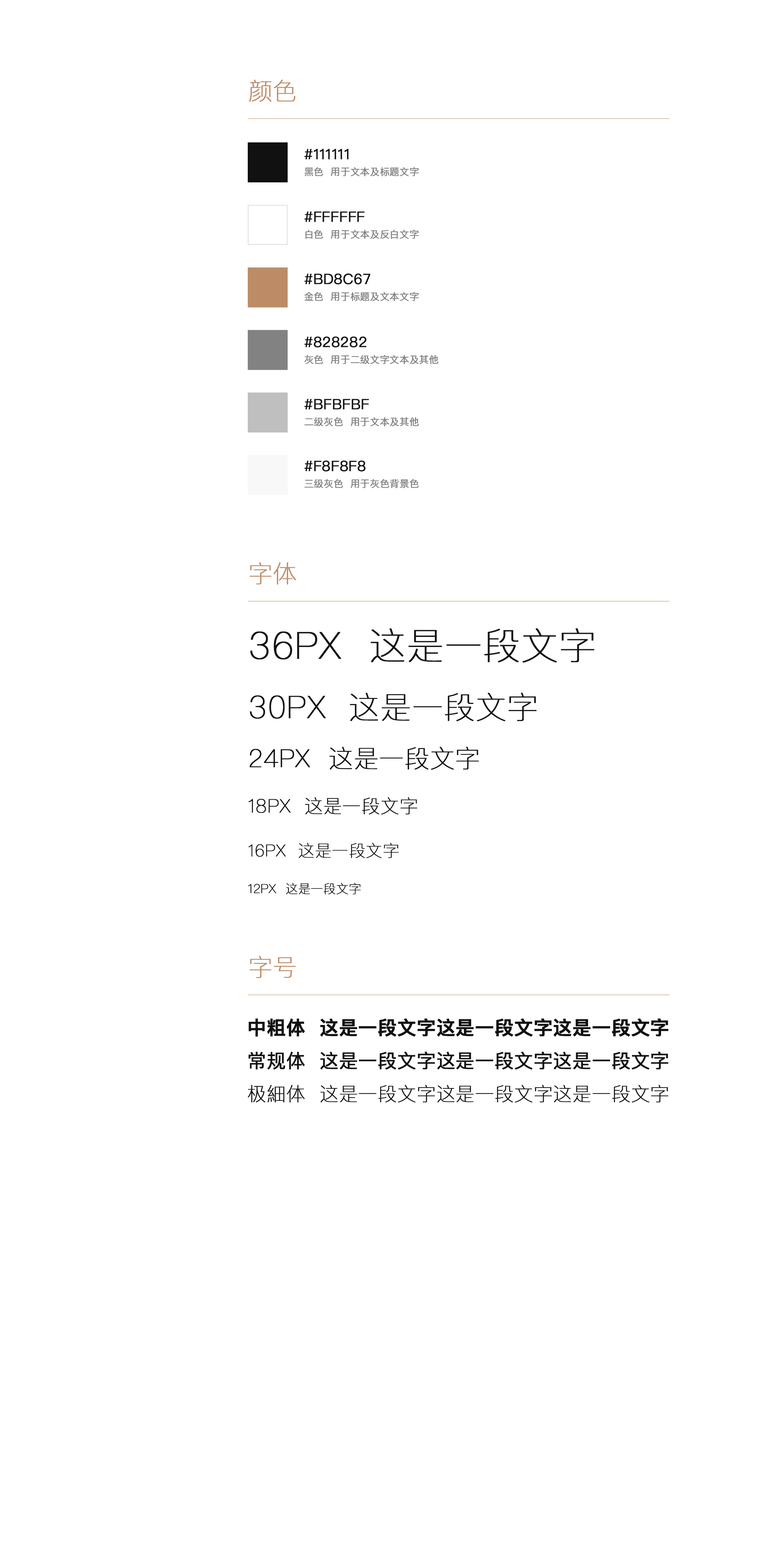
<style>
.page{position:relative;width:766px;height:1557px;background:#ffffff}
.page>*{position:absolute;margin:0}
.t1{font:23.9px "PingFangSC-Ultralight";color:#bd8c67;text-transform:uppercase;font-weight:bold}
.t2{font:9.6px/19.9px "PingFangSC-Regular";color:#828282;text-transform:uppercase;font-weight:bold}
.t3{font:14.4px/19.9px "PingFangSC-Regular";color:#111111;text-transform:uppercase;font-weight:bold}
.t4{font:37.1px "PingFangSC-Ultralight";color:#111111;text-transform:uppercase;font-weight:bold}
.t5{font:30.9px "PingFangSC-Ultralight";color:#111111;text-transform:uppercase;font-weight:bold}
.t6{font:24.7px/50.7px "PingFangSC-Ultralight";color:#111111;text-transform:uppercase;font-weight:bold}
.t7{font:18.5px/45.7px "PingFangSC-Ultralight";color:#111111;text-transform:uppercase;font-weight:bold}
.t8{font:16.5px/40.6px "PingFangSC-Ultralight";color:#111111;text-transform:uppercase;font-weight:bold}
.t9{font:12.4px/40.6px "PingFangSC-Ultralight";color:#111111;text-transform:uppercase;font-weight:bold}
.t10{font:19px "PingFangSC-Semibold";color:#111111;text-transform:uppercase;font-weight:bold}
.t11{font:19px "PingFangSC-Regular";color:#111111;text-transform:uppercase;font-weight:bold}
.t12{font:19px "PingFangSC-Ultralight";color:#111111;text-transform:uppercase;font-weight:bold}
</style>
<div class="page">
<p class="t1" style="left:249px;top:79px;width:47px;height:23px">颜色</p>
<p class="t2" style="left:304px;top:149px;width:115px;height:27px"><span class="t3">#111111<br></span>黑色  用于文本及标题文字</p>
<p class="t2" style="left:304px;top:211px;width:115px;height:28px"><span class="t3">#ffffff<br></span>白色  用于文本及反白文字</p>
<p class="t2" style="left:304px;top:273px;width:115px;height:28px"><span class="t3">#bd8c67<br></span>金色  用于标题及文本文字</p>
<p class="t2" style="left:304px;top:336px;width:134px;height:28px"><span class="t3">#828282<br></span>灰色  用于二级文字文本及其他</p>
<p class="t2" style="left:304px;top:399px;width:115px;height:27px"><span class="t3">#bfbfbf<br></span>二级灰色  用于文本及其他</p>
<p class="t2" style="left:304px;top:460px;width:115px;height:28px"><span class="t3">#f8f8f8<br></span>三级灰色  用于灰色背景色</p>
<p class="t1" style="left:249px;top:562px;width:47px;height:23px">字体</p>
<p class="t4" style="left:248px;top:628px;width:346px;height:267px">36px  这是一段文字<br><span class="t5">30px  这是一段文字<br></span><span class="t6">24PX  这是一段文字<br></span><span class="t7">18px  这是一段文字<br></span><span class="t8">16PX  这是一段文字<br></span><span class="t9">12PX  这是一段文字</span></p>
<p class="t1" style="left:249px;top:956px;width:47px;height:22px">字号</p>
<p class="t10" style="left:248px;top:1018px;width:420px;height:85px">中粗体  这是一段文字这是一段文字这是一段文字<br><span class="t11">常规体  这是一段文字这是一段文字这是一段文字<br></span><span class="t12">极細体  这是一段文字这是一段文字这是一段文字</span></p>
</div>
